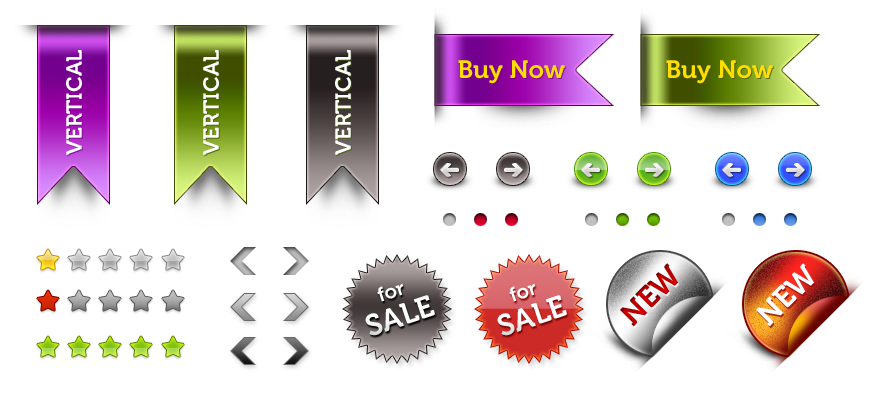
<style>
.page{position:relative;width:875px;height:400px;background:#ffffff}
.page>*{position:absolute;margin:0}
.t1{font:22px "Museo-700";color:#ffffff}
.t2{font:25px "Museo-700";color:#ffde00}
.t3{font:30px "Museo-700";text-transform:uppercase}
.t4{font:30px "Museo-700";color:#ffffff;text-transform:uppercase}
.t5{font:30px/30px "Museo-700";color:#ffffff;text-transform:uppercase}
.t6{font:20px/30px "Museo-700";color:#ffffff}
</style>
<div class="page">
<p class="t1" style="left:66px;top:50px;width:16px;height:105px;rotate:-90deg">VERTICAL</p>
<p class="t1" style="left:203px;top:50px;width:16px;height:105px;rotate:-90deg">VERTICAL</p>
<p class="t1" style="left:335px;top:50px;width:16px;height:105px;rotate:-90deg">VERTICAL</p>
<p class="t2" style="left:458px;top:60px;width:107px;height:24px">Buy Now</p>
<p class="t2" style="left:666px;top:60px;width:107px;height:24px">Buy Now</p>
<p class="t3" style="left:620px;top:263px;width:58px;height:64px;rotate:-45deg">NEW</p>
<p class="t4" style="left:756px;top:263px;width:58px;height:64px;rotate:-45deg">NEW</p>
<p class="t5" style="left:365px;top:283px;width:70px;height:53px;text-align:center;rotate:-18deg"><span class="t6">for<br></span>Sale</p>
<p class="t5" style="left:497px;top:283px;width:70px;height:53px;text-align:center;rotate:-18deg"><span class="t6">for<br></span>Sale</p>
</div>
